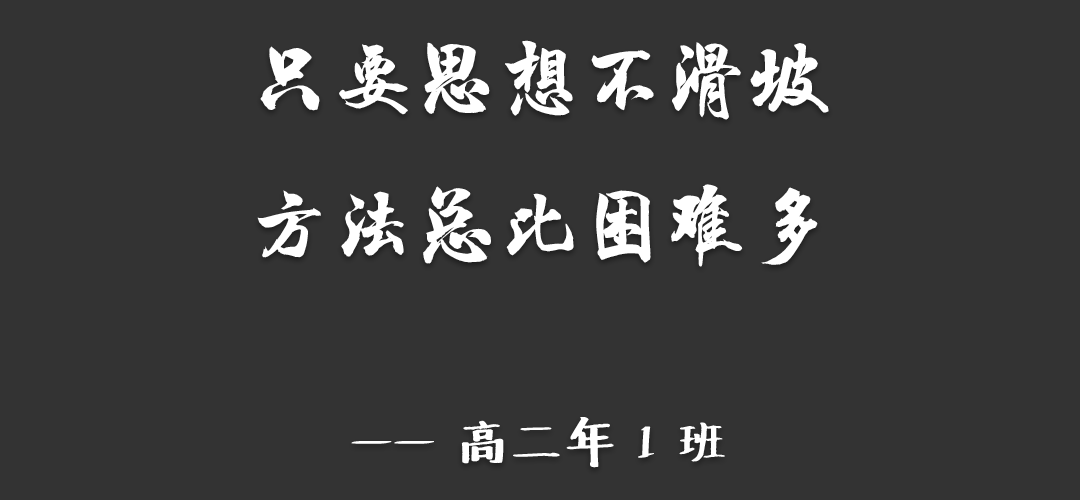
<style>
.page{position:relative;width:1080px;height:500px;background:#333333}
.page>*{position:absolute;margin:0}
.t1{font:83.3px "HYChengXingJ";color:#ffffff}
.t2{font:50px "Undefined";color:#ffffff}
</style>
<div class="page">
<p class="t1" style="left:257px;top:40px;width:572px;height:428px;text-align:center">只要思想不滑坡<br>方法总比困难多<br><span class="t2"><br>—— 高二年 1 班</span></p>
</div>
